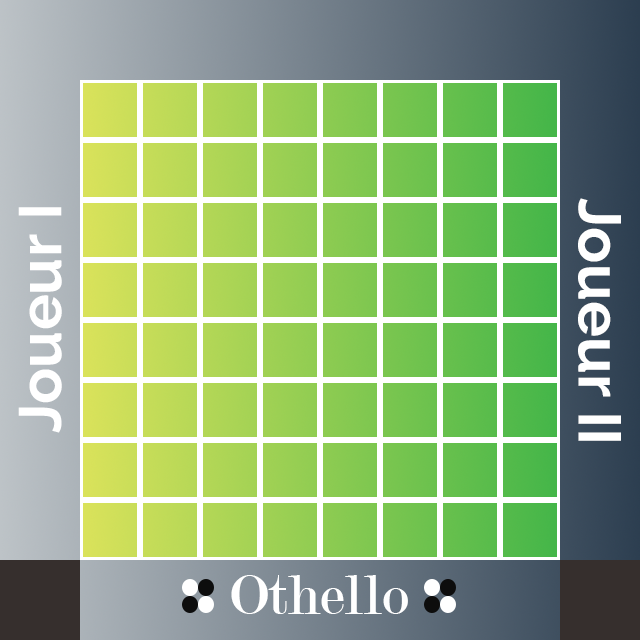
<style>
.page{position:relative;width:640px;height:640px}
.page>*{position:absolute;margin:0}
.t1{font:60px "Raleway-Bold";color:#ffffff}
.t2{font:60px "Modern-Regular";color:#ffffff}
</style>
<div class="page">
<p class="t1" style="left:578px;top:198px;width:43px;height:243px;rotate:90deg">Joueur II</p>
<p class="t1" style="left:18px;top:207px;width:44px;height:226px;rotate:-90deg">Joueur I</p>
<p class="t2" style="left:231px;top:575px;width:177px;height:39px">Othello</p>
</div>
